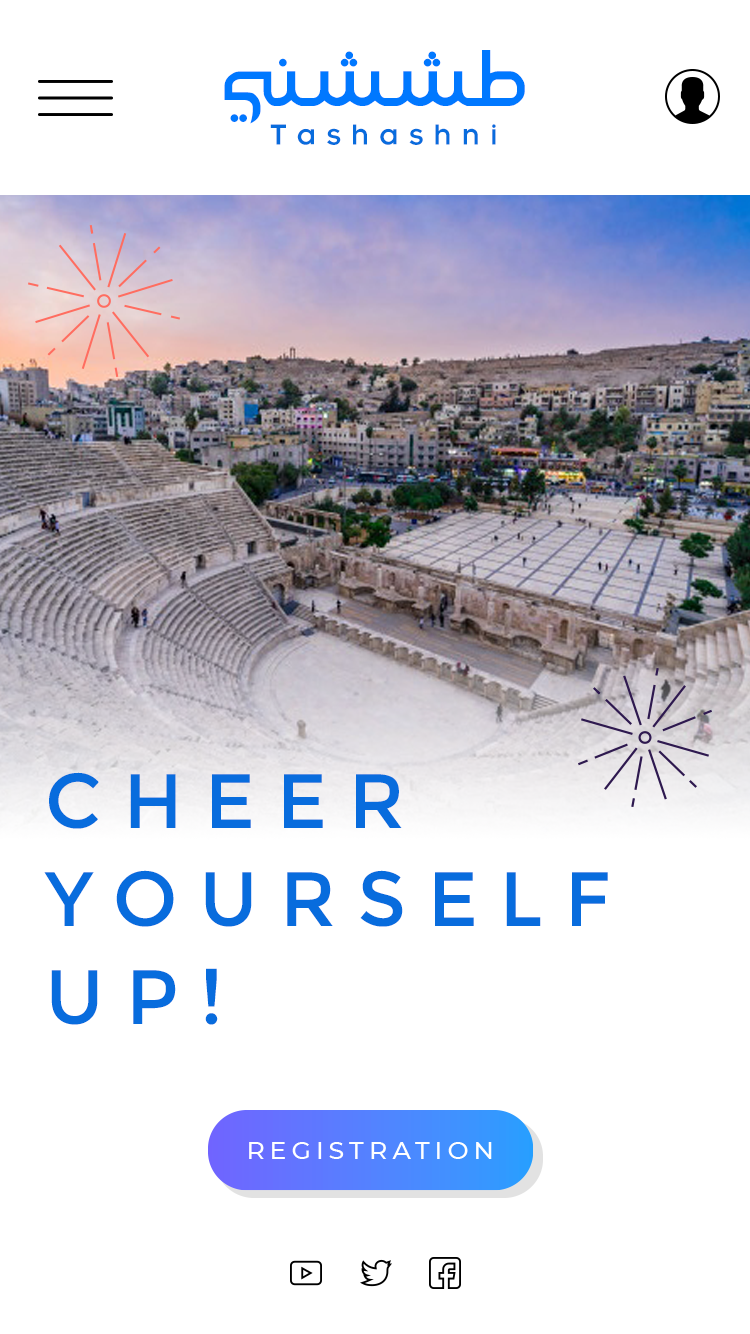
<style>
.page{position:relative;width:750px;height:1334px;background:#ffffff}
.page>*{position:absolute;margin:0}
.t1{font:78px "ASardarHoor";color:#0078ff}
.t2{font:36px "BoutrosART-Medium";letter-spacing:0.28em;color:#086cdd}
.t3{font:77px/98px "Montserrat-Regular";letter-spacing:0.28em;color:#086cdd;text-transform:uppercase}
</style>
<div class="page">
<p class="t1" style="left:224px;top:50px;width:301px;height:74px">طـشـشـني</p>
<p class="t2" style="left:270px;top:124px;width:226px;height:21px">Tashashni</p>
<p class="t3" style="left:44px;top:772px;width:564px;height:253px">Cheer <br>Yourself<br>Up!</p>
</div>
